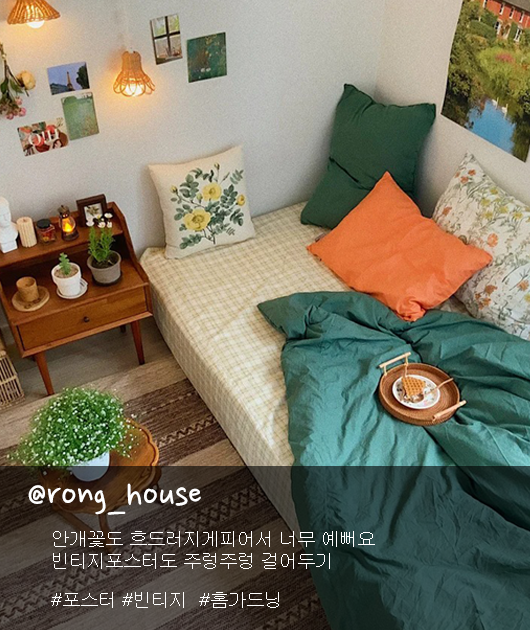
<style>
.page{position:relative;width:530px;height:630px}
.page>*{position:absolute;margin:0}
.t1{font:39.7px "NanumPen";color:#ffffff}
.t2{font:18px "Gulim";color:#ffffff}
</style>
<div class="page">
<p class="t1" style="left:28px;top:483px;width:173px;height:32px">@rong_house</p>
<p class="t2" style="left:53px;top:531px;width:322px;height:38px">안개꽃도 흐드러지게피어서 너무 예뻐요<br>빈티지포스터도 주렁주렁 걸어두기</p>
<p class="t2" style="left:51px;top:592px;width:228px;height:16px">#포스터 #빈티지  #홈가드닝</p>
</div>
